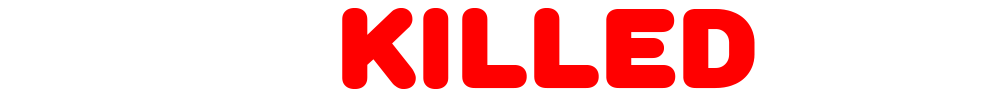
<style>
.page{position:relative;width:1000px;height:100px;background:#ffffff}
.page>*{position:absolute;margin:0}
.t1{font:113px "RoundsBlack";color:#ff0000}
</style>
<div class="page">
<p class="t1" style="left:342px;top:8px;width:413px;height:81px">killed</p>
</div>
